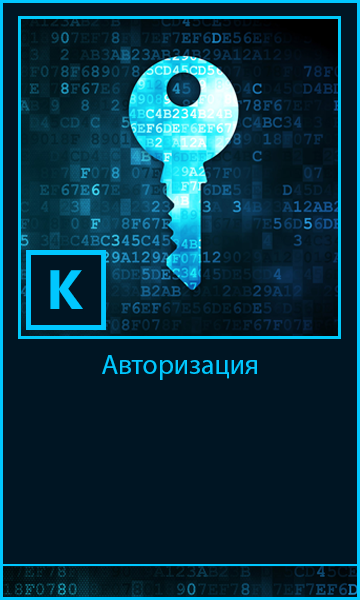
<style>
.page{position:relative;width:360px;height:600px;background:#001523}
.page>*{position:absolute;margin:0}
.t1{font:55.6px "NirmalaUI-Bold";color:#00c7ff}
.t2{font:27.8px "MyriadPro-Regular";color:#00c7ff}
</style>
<div class="page">
<p class="t1" style="left:50px;top:270px;width:33px;height:39px">K</p>
<p class="t2" style="left:102px;top:355px;width:155px;height:25px">Авторизация</p>
</div>
